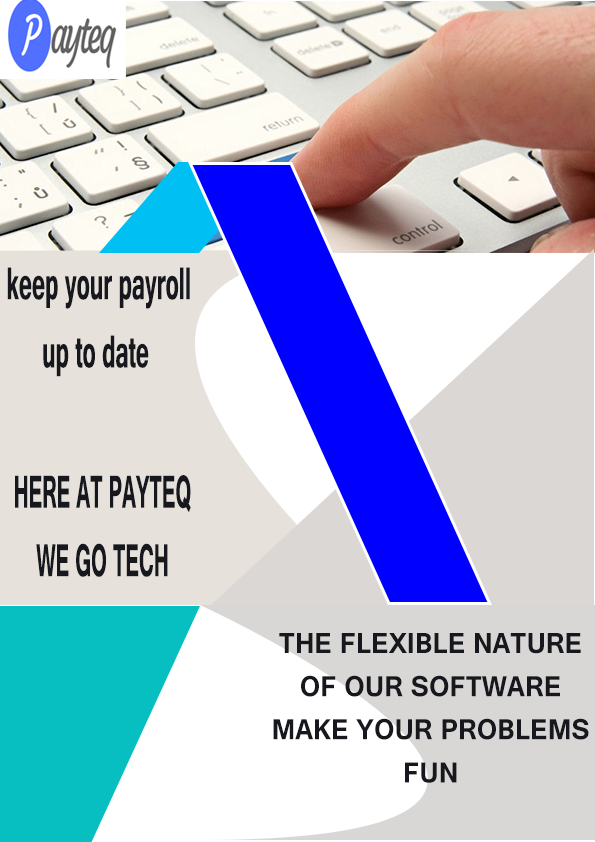
<style>
.page{position:relative;width:595px;height:842px}
.page>*{position:absolute;margin:0}
.t1{font:56.7px "Tunga-Bold";color:#17181d;scale:0.5 1}
.t2{font:57.1px "Tunga-Bold";color:#17181d;scale:0.46 1}
.t3{font:36px "Tunga-Bold";color:#17181d;scale:0.94 1}
</style>
<div class="page">
<p class="t1" style="left:7px;top:267px;width:183px;height:110px;text-align:center">keep your payroll <br>up to date</p>
<p class="t2" style="left:15px;top:475px;width:176px;height:102px;text-align:center">HERE AT PAYTEQ<br>WE GO TECH</p>
<p class="t3" style="left:273px;top:633px;width:316px;height:150px;text-align:center">THE FLEXIBLE NATURE OF OUR SOFTWARE MAKE YOUR PROBLEMS <br>FUN</p>
</div>
